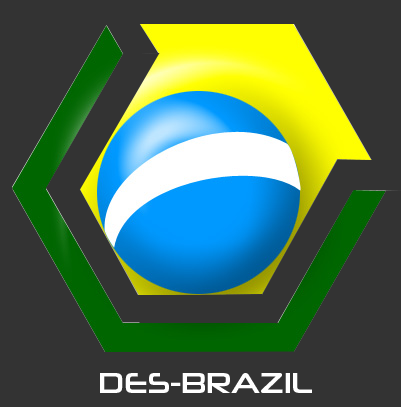
<style>
.page{position:relative;width:401px;height:407px;background:#333333}
.page>*{position:absolute;margin:0}
.t1{font:28px "NeuropoliticalRg-Regular";color:#ffffff}
</style>
<div class="page">
<p class="t1" style="left:100px;top:373px;width:212px;height:20px">DES-BRAZIL</p>
</div>
